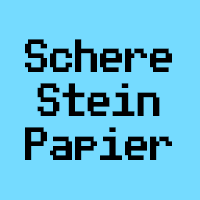
<style>
.page{position:relative;width:200px;height:200px;background:#75dbff}
.page>*{position:absolute;margin:0}
.t1{font:37.5px/44px "PublicPixel";color:#000000;scale:0.67 1}
</style>
<div class="page">
<p class="t1" style="left:25px;top:39px;width:147px;height:121px;text-align:center">Schere<br>Stein<br>Papier</p>
</div>
